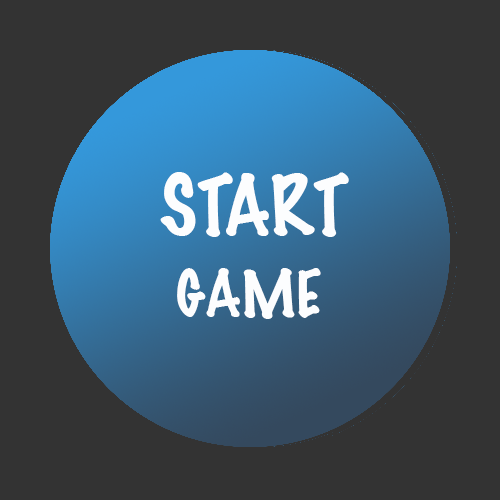
<style>
.page{position:relative;width:500px;height:500px;background:#333333}
.page>*{position:absolute;margin:0}
.t1{font:75px "MarkerFelt-Thin";color:#fcfdfe}
.t2{font:58.3px "MarkerFelt-Thin";color:#fcfdfe}
</style>
<div class="page">
<p class="t1" style="left:160px;top:172px;width:189px;height:65px">START</p>
<p class="t2" style="left:177px;top:268px;width:144px;height:51px">GAME</p>
</div>
